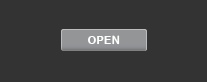
<style>
.page{position:relative;width:207px;height:82px;background:#333333}
.page>*{position:absolute;margin:0}
.t1{font:10.7px "H2gtrE";color:#ffffff}
</style>
<div class="page">
<p class="t1" style="left:88px;top:35px;width:32px;height:10px">OPEN</p>
</div>
